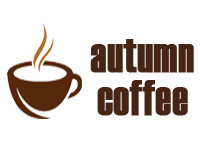
<style>
.page{position:relative;width:200px;height:150px;background:#ffffff}
.page>*{position:absolute;margin:0}
.t1{font:48.9px "Haettenschweiler";color:#472515;font-weight:bold;scale:0.87 1}
</style>
<div class="page">
<p class="t1" style="left:90px;top:39px;width:104px;height:34px">autumn</p>
<p class="t1" style="left:97px;top:80px;width:91px;height:36px">coffee</p>
</div>
